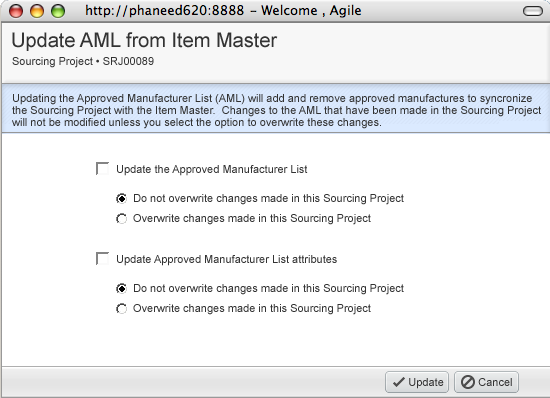
<style>
.page{position:relative;width:550px;height:398px;background:#ffffff}
.page>*{position:absolute;margin:0}
.t1{font:20px "ArialMT";color:#333333}
.t2{font:11px "ArialMT";color:#333333}
.t3{font:11px/12px "ArialMT";color:#333333}
</style>
<div class="page">
<p class="t1" style="left:12px;top:32px;width:266px;height:19px">Update AML from Item Master</p>
<p class="t2" style="left:12px;top:57px;width:142px;height:11px">Sourcing Project • SRJ00089</p>
<p class="t3" style="left:12px;top:94px;width:529px;height:35px">Updating the Approved Manufacturer List (AML) will add and remove approved manufactures to syncronize<br>the Sourcing Project with the Item Master.  Changes to the AML that have been made in the Sourcing Project<br>will not be modified unless you select the option to overwrite these changes.</p>
<p class="t2" style="left:117px;top:165px;width:191px;height:11px">Update the Approved Manufacturer List</p>
<p class="t2" style="left:134px;top:194px;width:270px;height:11px">Do not overwrite changes made in this Sourcing Project</p>
<p class="t2" style="left:133px;top:214px;width:238px;height:11px">Overwrite changes made in this Sourcing Project</p>
<p class="t2" style="left:117px;top:255px;width:220px;height:11px">Update Approved Manufacturer List attributes</p>
<p class="t2" style="left:134px;top:284px;width:270px;height:11px">Do not overwrite changes made in this Sourcing Project</p>
<p class="t2" style="left:133px;top:304px;width:238px;height:11px">Overwrite changes made in this Sourcing Project</p>
<p class="t2" style="left:409px;top:378px;width:35px;height:11px">Update</p>
<p class="t2" style="left:478px;top:378px;width:34px;height:8px">Cancel</p>
</div>
